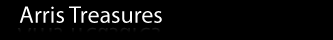
<style>
.page{position:relative;width:333px;height:40px;background:#000000}
.page>*{position:absolute;margin:0}
.t1{font:24px "MyriadPro-Regular";color:#fefefe}
</style>
<div class="page">
<p class="t1" style="left:19px;top:6px;width:143px;height:17px">Arris Treasures</p>
</div>
